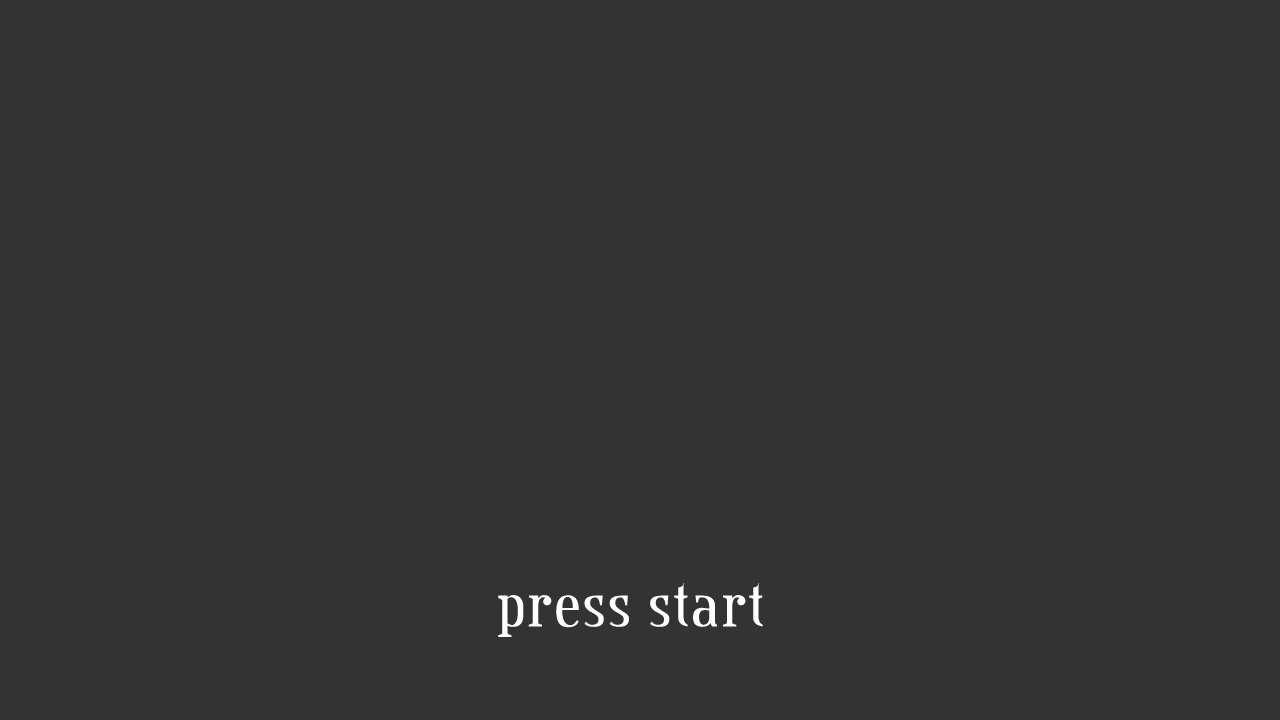
<style>
.page{position:relative;width:1280px;height:720px;background:#333333}
.page>*{position:absolute;margin:0}
.t1{font:72px "CreditValley";color:#ffffff}
</style>
<div class="page">
<p class="t1" style="left:498px;top:583px;width:265px;height:54px">press start</p>
</div>
